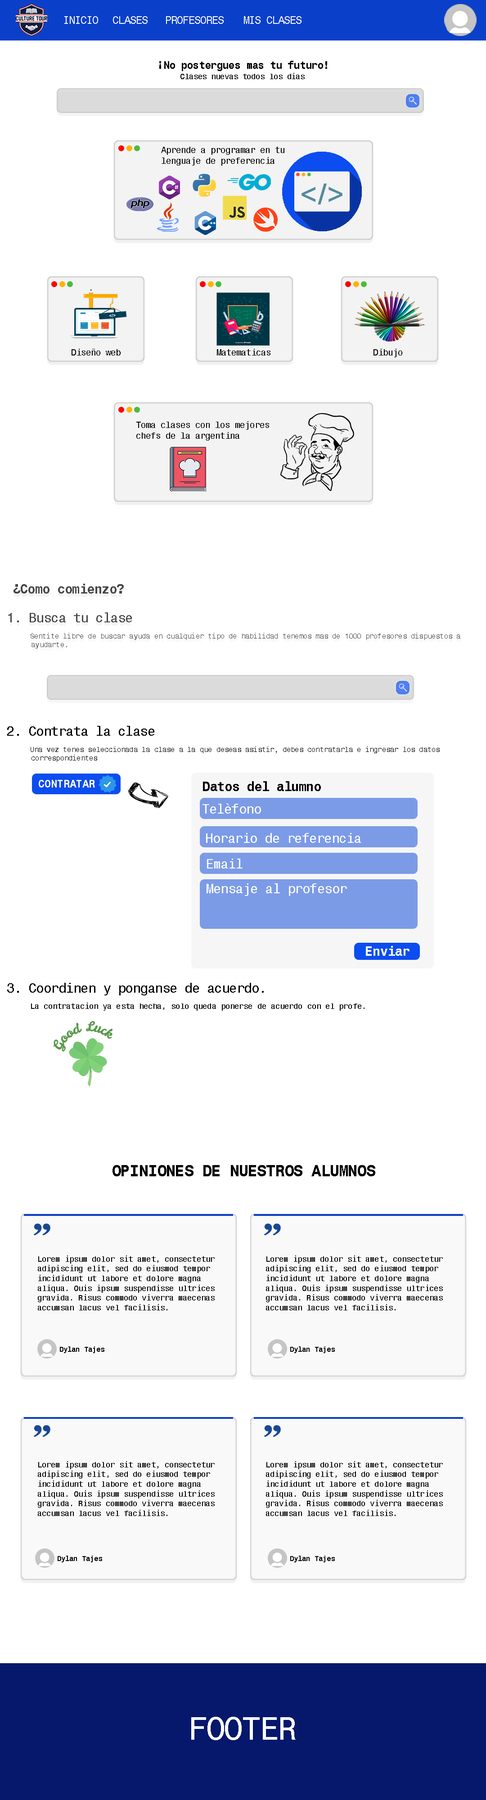
<style>
.page{position:relative;width:486px;height:1800px;background:#ffffff}
.page>*{position:absolute;margin:0}
.t1{font:10.6px "Monospace821BT-Roman";letter-spacing:-0.05em;color:#ffffff}
.t2{font:10.8px "Monospace821BT-Bold";letter-spacing:-0.05em;color:#000000}
.t3{font:8.1px "Monospace821BT-Roman";letter-spacing:-0.05em;color:#000000}
.t4{font:9px "Monospace821BT-Roman";letter-spacing:-0.05em;color:#000000}
.t5{font:16.2px "Monospace821BT-Bold";letter-spacing:-0.05em;color:#000000}
.t6{font:7.2px "Monospace821BT-Bold";letter-spacing:-0.05em;color:#000000}
.t7{font:32.4px "Monospace821BT-Roman";letter-spacing:-0.05em;color:#ffffff}
</style>
<div class="page">
<p class="t1" style="left:64px;top:16px;width:34px;height:8px">INICIO</p>
<p class="t1" style="left:113px;top:16px;width:35px;height:8px">CLASES</p>
<p class="t1" style="left:166px;top:16px;width:58px;height:8px">PROFESORES</p>
<p class="t1" style="left:244px;top:16px;width:58px;height:8px">MIS CLASES</p>
<p class="t2" style="left:159px;top:61px;width:168px;height:10px">¡No postergues mas tu futuro!</p>
<p class="t3" style="left:180px;top:73px;width:125px;height:6px">Clases nuevas todos los dias</p>
<p class="t4" style="left:161px;top:147px;width:123px;height:19px">Aprende a programar en tu lenguaje de preferencia</p>
<p class="t4" style="left:72px;top:349px;width:49px;height:7px">Diseño web</p>
<p class="t4" style="left:217px;top:349px;width:53px;height:7px">Matematicas</p>
<p class="t4" style="left:374px;top:349px;width:28px;height:8px">Dibujo</p>
<p class="t4" style="left:136px;top:421px;width:133px;height:20px">Toma clases con los mejores chefs de la argentina</p>
<p class="t5" style="left:112px;top:1165px;width:263px;height:11px">OPINIONES DE NUESTROS ALUMNOS</p>
<p class="t3" style="left:38px;top:1256px;width:177px;height:54px">Lorem ipsum dolor sit amet, consectetur adipiscing elit, sed do eiusmod tempor incididunt ut labore et dolore magna aliqua. Quis ipsum suspendisse ultrices gravida. Risus commodo viverra maecenas accumsan lacus vel facilisis.</p>
<p class="t3" style="left:266px;top:1256px;width:177px;height:54px">Lorem ipsum dolor sit amet, consectetur adipiscing elit, sed do eiusmod tempor incididunt ut labore et dolore magna aliqua. Quis ipsum suspendisse ultrices gravida. Risus commodo viverra maecenas accumsan lacus vel facilisis.</p>
<p class="t6" style="left:60px;top:1346px;width:44px;height:7px">Dylan Tajes</p>
<p class="t6" style="left:290px;top:1346px;width:45px;height:7px">Dylan Tajes</p>
<p class="t3" style="left:38px;top:1461px;width:177px;height:55px">Lorem ipsum dolor sit amet, consectetur adipiscing elit, sed do eiusmod tempor incididunt ut labore et dolore magna aliqua. Quis ipsum suspendisse ultrices gravida. Risus commodo viverra maecenas accumsan lacus vel facilisis.</p>
<p class="t3" style="left:266px;top:1461px;width:177px;height:55px">Lorem ipsum dolor sit amet, consectetur adipiscing elit, sed do eiusmod tempor incididunt ut labore et dolore magna aliqua. Quis ipsum suspendisse ultrices gravida. Risus commodo viverra maecenas accumsan lacus vel facilisis.</p>
<p class="t6" style="left:58px;top:1556px;width:44px;height:6px">Dylan Tajes</p>
<p class="t6" style="left:290px;top:1556px;width:45px;height:6px">Dylan Tajes</p>
<p class="t7" style="left:191px;top:1717px;width:105px;height:23px">FOOTER</p>
</div>
